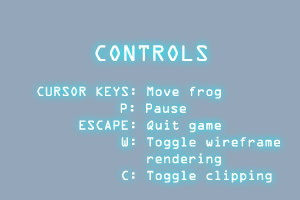
<style>
.page{position:relative;width:300px;height:200px;background:#94a6b9}
.page>*{position:absolute;margin:0}
.t1{font:24px "OCRAExtended";color:#ffffff}
.t2{font:14px "OCRAExtended";color:#ffffff}
</style>
<div class="page">
<p class="t1" style="left:95px;top:45px;width:112px;height:16px">CONTROLS</p>
<p class="t2" style="left:37px;top:86px;width:243px;height:97px">CURSOR KEYS: Move frog<br>                       P: Pause<br>     ESCAPE: Quit game<br>          W: Toggle wireframe<br>             rendering<br>          C: Toggle clipping</p>
</div>
